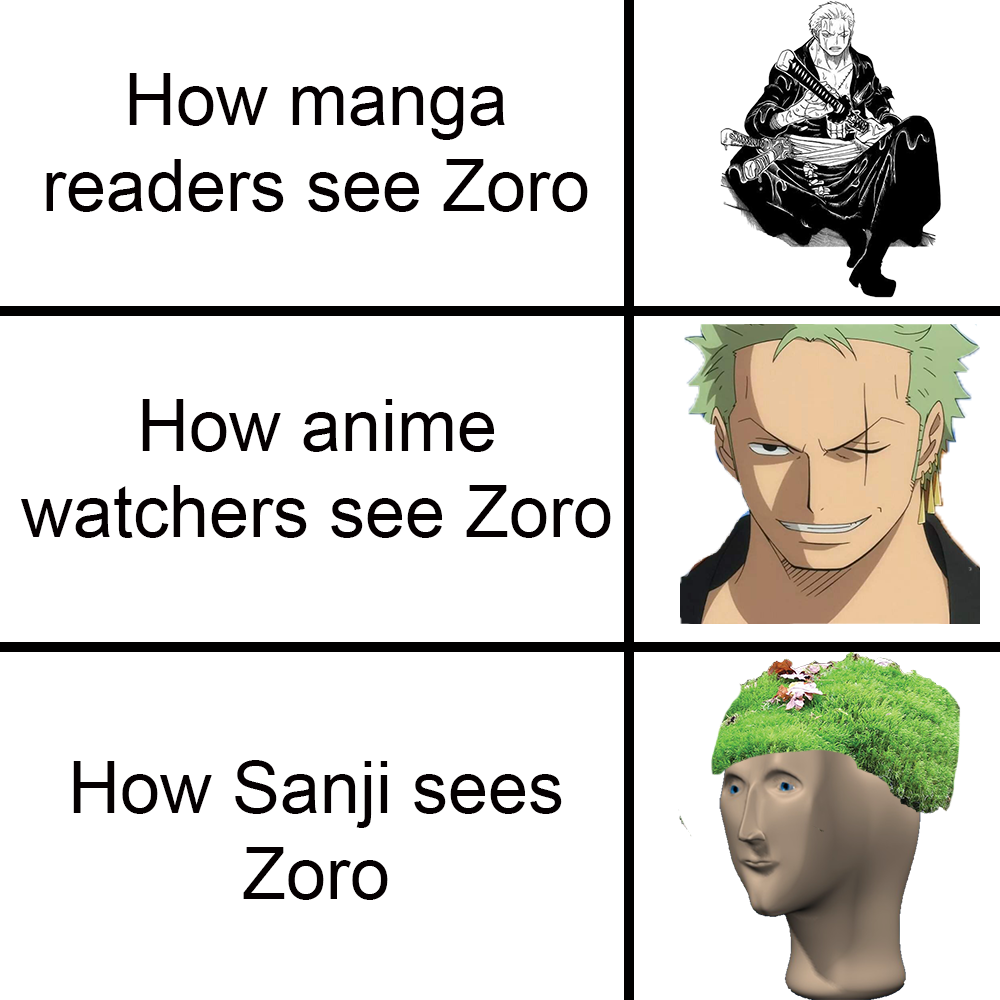
<style>
.page{position:relative;width:1000px;height:1000px;background:#ffffff}
.page>*{position:absolute;margin:0}
.t1{font:72px "ArialMT";color:#050001}
</style>
<div class="page">
<p class="t1" style="left:46px;top:73px;width:542px;height:139px;text-align:center">How manga readers see Zoro</p>
<p class="t1" style="left:21px;top:399px;width:590px;height:139px;text-align:center">How anime watchers see Zoro</p>
<p class="t1" style="left:73px;top:760px;width:489px;height:140px;text-align:center">How Sanji sees Zoro</p>
</div>
